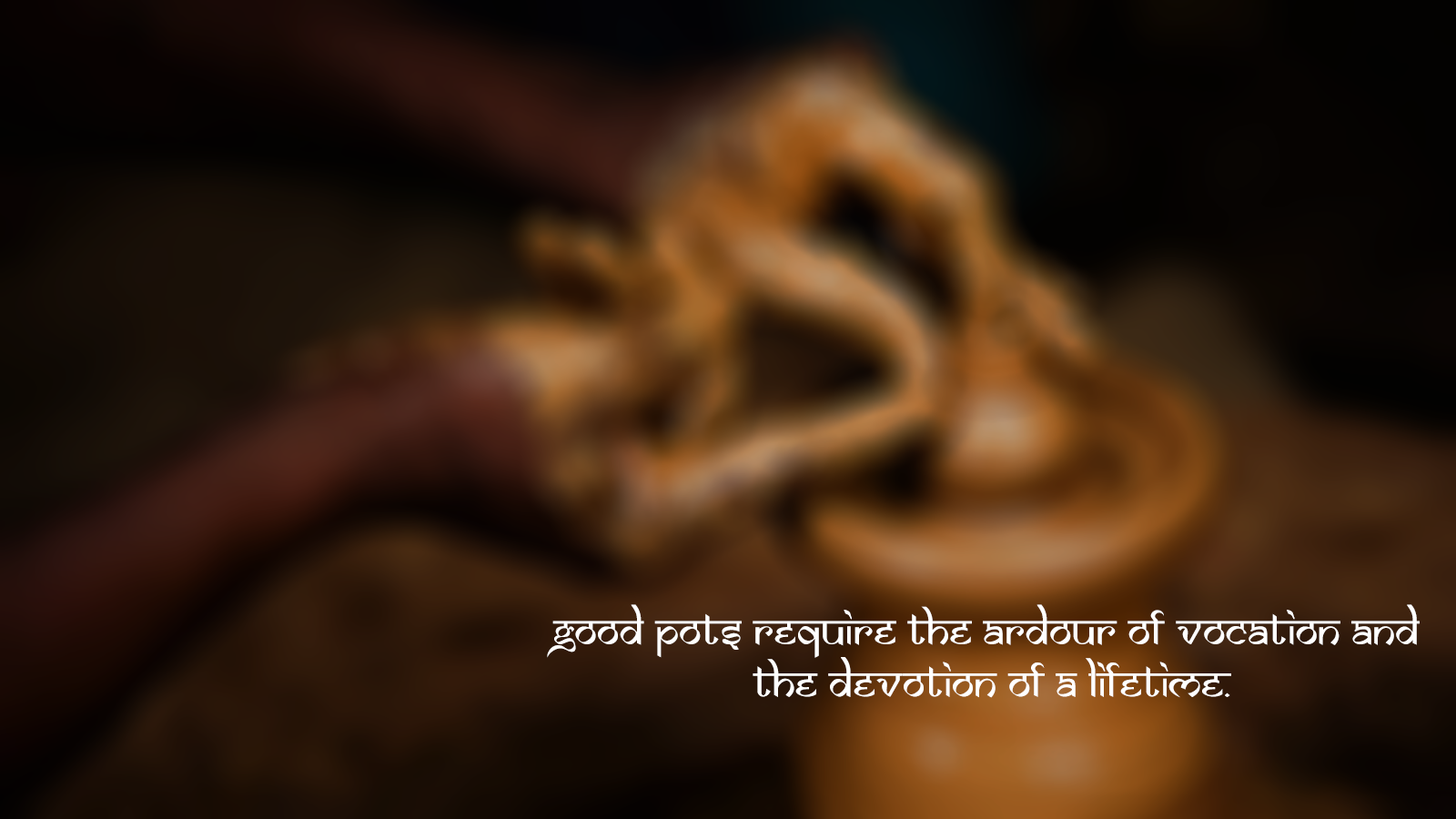
<style>
.page{position:relative;width:1456px;height:819px}
.page>*{position:absolute;margin:0}
.t1{font:43.7px "SamarkanNormal";color:#ffffff}
</style>
<div class="page">
<p class="t1" style="left:547px;top:604px;width:873px;height:94px;text-align:center">Good pots require the ardour of vocation and<br> the devotion of a lifetime.</p>
</div>
